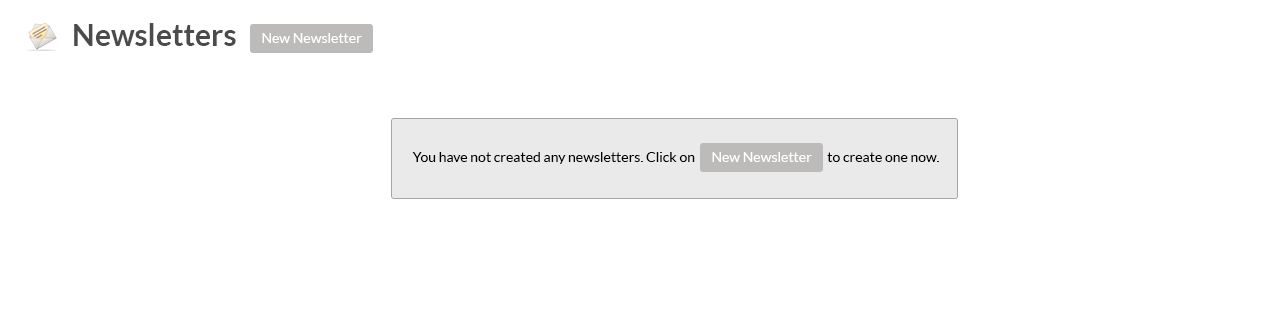
<style>
.page{position:relative;width:1280px;height:322px;background:#ffffff}
.page>*{position:absolute;margin:0}
.t1{font:30px "Lato-Bold";color:#4b4b4b}
.t2{font:14px "Lato-Regular";color:#ffffff}
.t3{font:14px "Lato-Regular";color:#000000}
</style>
<div class="page">
<p class="t1" style="left:74px;top:23px;width:162px;height:23px">Newsletters</p>
<p class="t2" style="left:262px;top:33px;width:100px;height:10px">New Newsletter</p>
<p class="t3" style="left:412px;top:152px;width:527px;height:12px">You have not created any newsletters. Click on                                                 to create one now.</p>
<p class="t2" style="left:712px;top:152px;width:100px;height:10px">New Newsletter</p>
</div>
